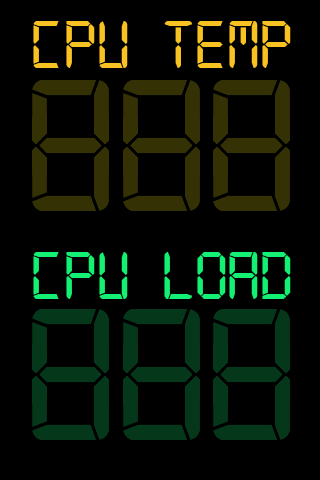
<style>
.page{position:relative;width:320px;height:480px;background:#000000}
.page>*{position:absolute;margin:0}
.t1{font:72px "Digital-7Mono";color:#f8c322}
.t2{font:72px "Digital-7Mono";color:#14f074}
</style>
<div class="page">
<p class="t1" style="left:33px;top:21px;width:258px;height:47px">CPU TEMP</p>
<p class="t2" style="left:33px;top:252px;width:258px;height:47px">CPU LOAD</p>
</div>
